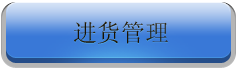
<style>
.page{position:relative;width:237px;height:69px}
.page>*{position:absolute;margin:0}
.t1{font:24px "SimSun";color:#191202;text-transform:uppercase}
</style>
<div class="page">
<p class="t1" style="left:74px;top:21px;width:94px;height:23px">进货管理</p>
</div>
